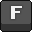
<style>
.page{position:relative;width:32px;height:32px;background:#545454}
.page>*{position:absolute;margin:0}
.t1{font:14.7px "Dogica_bold";color:#f1f1f1}
</style>
<div class="page">
<p class="t1" style="left:11px;top:6px;width:11px;height:13px">F</p>
</div>
